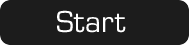
<style>
.page{position:relative;width:189px;height:45px;background:#1c1c1c}
.page>*{position:absolute;margin:0}
.t1{font:31.4px "MicroSquare";color:#ffffff}
</style>
<div class="page">
<p class="t1" style="left:57px;top:10px;width:69px;height:23px">Start</p>
</div>
